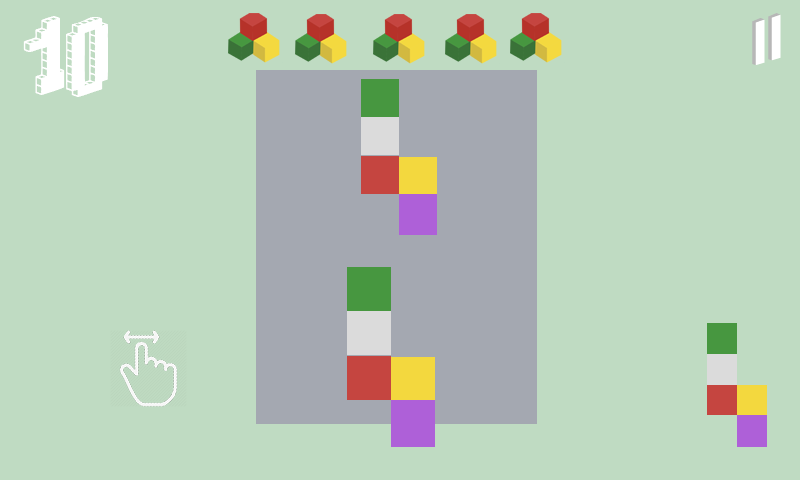
<style>
.page{position:relative;width:800px;height:480px;background:#bfdbc2}
.page>*{position:absolute;margin:0}
.t1{font:89px "Blox-(BRK";color:#ffffff}
</style>
<div class="page">
<p class="t1" style="left:23px;top:16px;width:85px;height:81px">10</p>
</div>
